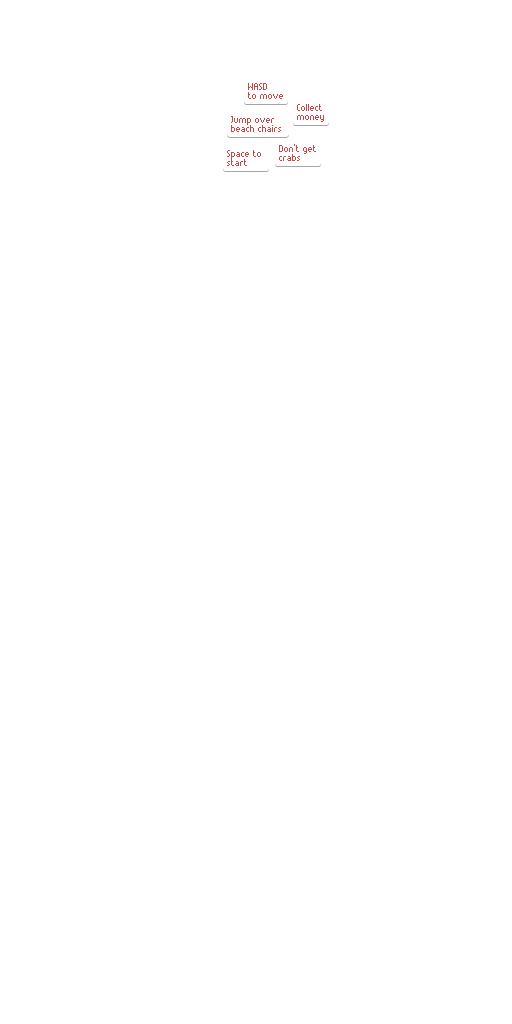
<style>
.page{position:relative;width:512px;height:1024px;background:#ffffff}
.page>*{position:absolute;margin:0}
.t1{font:10px/9px "Munro";color:#c6484b}
</style>
<div class="page">
<p class="t1" style="left:248px;top:83px;width:35px;height:16px">WASD<br>to move</p>
<p class="t1" style="left:297px;top:104px;width:27px;height:18px">Collect<br>money</p>
<p class="t1" style="left:231px;top:116px;width:50px;height:16px">Jump over<br>beach chairs</p>
<p class="t1" style="left:227px;top:150px;width:34px;height:16px">Space to<br>start</p>
<p class="t1" style="left:279px;top:144px;width:37px;height:17px">Don’t get<br>crabs</p>
</div>
